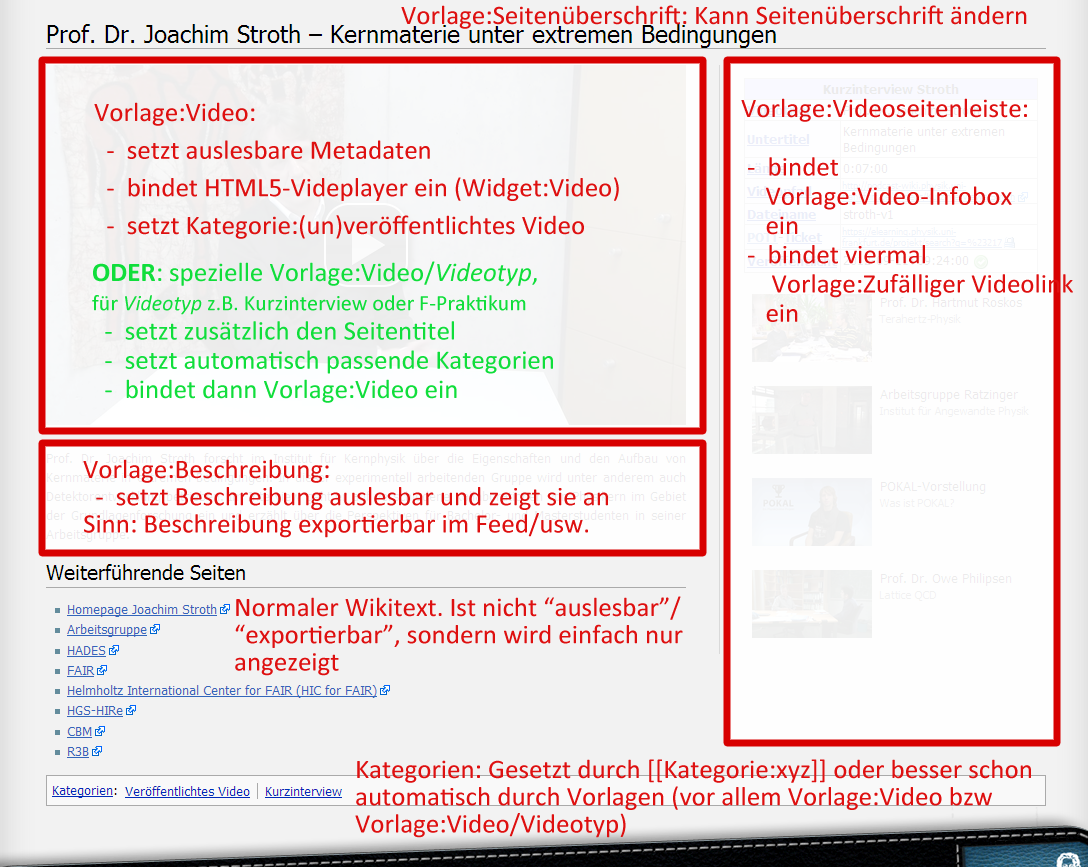
<style>
.page{position:relative;width:1088px;height:867px;background:#f2f2f2}
.page>*{position:absolute;margin:0}
.t1{font:27px "Calibri";color:#de1010}
.t2{font:27px/24px "Calibri";color:#de1010}
.t3{font:27px/24px "Calibri";color:#10de3b}
.t4{font:27px/24px "Calibri-Bold";color:#10de3b}
.t5{font:27px/24px "Calibri-Italic";color:#10de3b}
.t6{font:22px/24px "Calibri";color:#10de3b}
.t7{font:22px/24px "Calibri-Italic";color:#10de3b}
.t8{font:27px/22px "Calibri";color:#de1010}
</style>
<div class="page">
<p class="t1" style="left:401px;top:5px;width:626px;height:24px">Vorlage:Seitenüberschrift: Kann Seitenüberschrift ändern</p>
<p class="t1" style="left:94px;top:102px;width:525px;height:137px">Vorlage:Video:<br>  -  setzt auslesbare Metadaten<br>  -  bindet HTML5-Videplayer ein (Widget:Video)<br>  -  setzt Kategorie:(un)veröffentlichtes Video</p>
<p class="t2" style="left:741px;top:98px;width:332px;height:224px">Vorlage:Videoseitenleiste:<br><br> -  bindet<br>    Vorlage:Video-Infobox <br>    ein<br> -  bindet viermal<br>     Vorlage:Zufälliger Videolink<br>    ein</p>
<p class="t3" style="left:92px;top:261px;width:461px;height:142px"><span class="t4">ODER</span>: spezielle Vorlage:Video/<span class="t5">Videotyp</span>,<br><span class="t6">für </span><span class="t7">Videotyp </span><span class="t6">z.B. Kurzinterview oder F-Praktikum<br></span>  -  setzt zusätzlich den Seitentitel<br>  -  setzt automatisch passende Kategorien<br>  -  bindet dann Vorlage:Video ein</p>
<p class="t8" style="left:83px;top:459px;width:525px;height:79px">Vorlage:Beschreibung:<br>  -  setzt Beschreibung auslesbar und zeigt sie an<br>Sinn: Beschreibung exportierbar im Feed/usw.</p>
<p class="t8" style="left:235px;top:596px;width:448px;height:80px">Normaler Wikitext. Ist nicht “auslesbar”/<br>“exportierbar”, sondern wird einfach nur<br>angezeigt</p>
<p class="t8" style="left:355px;top:759px;width:676px;height:79px">Kategorien: Gesetzt durch [[Kategorie:xyz]] oder besser schon<br>automatisch durch Vorlagen (vor allem Vorlage:Video bzw<br>Vorlage:Video/Videotyp)</p>
</div>
